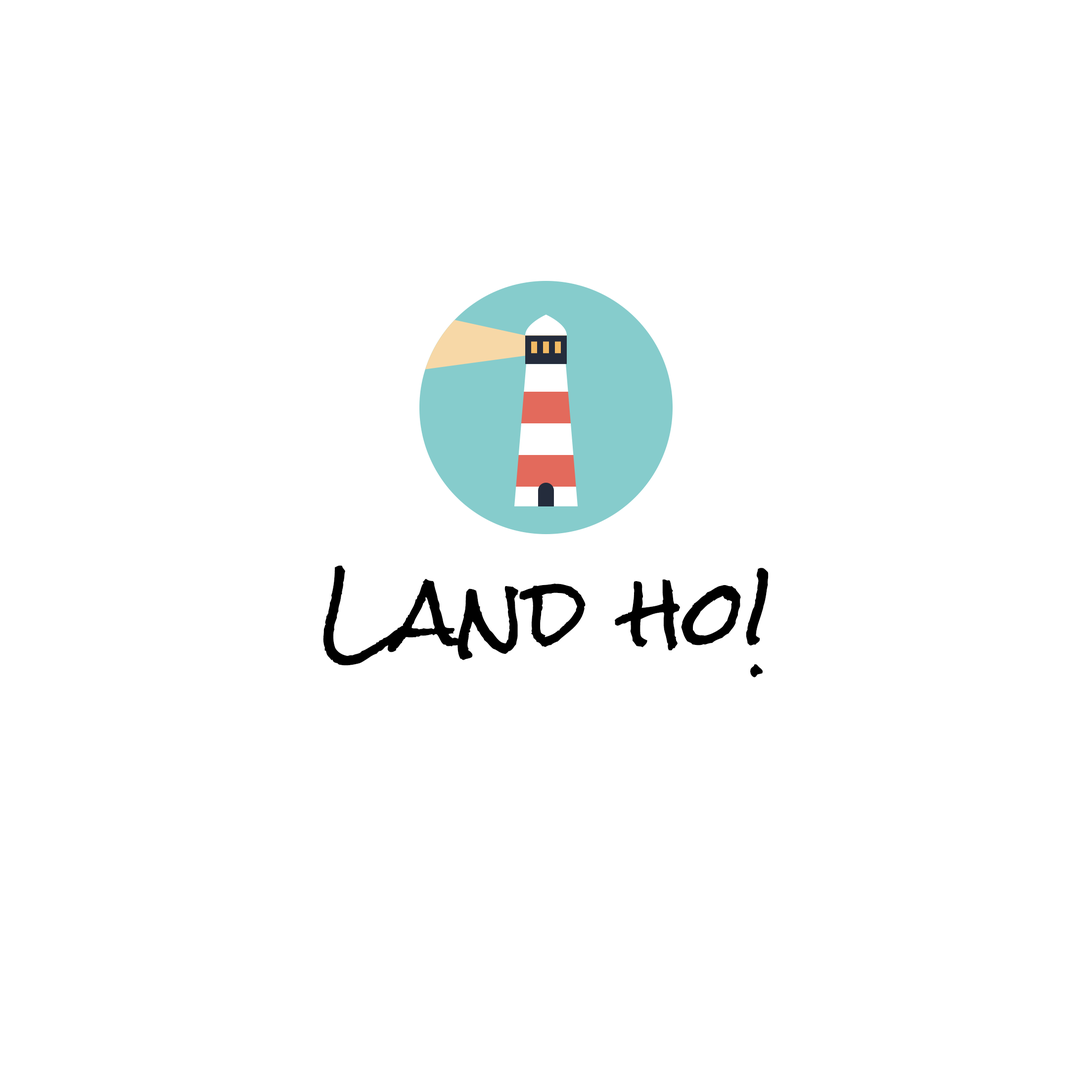
<style>
.page{position:relative;width:1092px;height:1092px;background:#ffffff}
.page>*{position:absolute;margin:0}
.t1{font:89px "RockSalt";color:#000000}
</style>
<div class="page">
<p class="t1" style="left:323px;top:565px;width:446px;height:113px">Land ho!</p>
</div>
